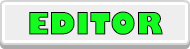
<style>
.page{position:relative;width:190px;height:49px;background:#eeeeee}
.page>*{position:absolute;margin:0}
.t1{font:30px "GillSans-UltraBold";color:#14fb1f;text-transform:uppercase}
</style>
<div class="page">
<p class="t1" style="left:29px;top:11px;width:134px;height:24px">Editor</p>
</div>
